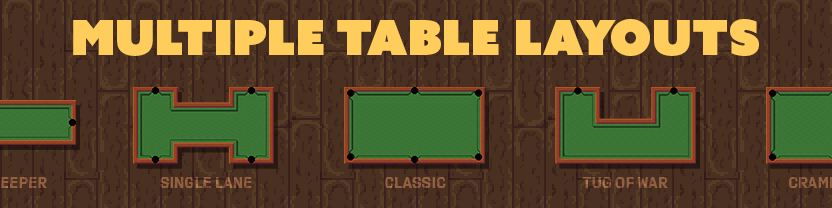
<style>
.page{position:relative;width:832px;height:208px;background:#4a3021}
.page>*{position:absolute;margin:0}
.t1{font:48px "AzoSansUber-Regular";color:#ffcd5b}
.t2{font:16px "Export";color:#946042}
</style>
<div class="page">
<p class="t1" style="left:73px;top:19px;width:686px;height:37px">Multiple TABLE LAYOUTS</p>
<p class="t2" style="left:160px;top:177px;width:92px;height:11px">SINGLE LANE</p>
<p class="t2" style="left:385px;top:177px;width:61px;height:11px">CLASSIC</p>
<p class="t2" style="left:582px;top:177px;width:86px;height:11px">TUG OF WAR</p>
</div>
